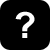
<style>
.page{position:relative;width:50px;height:50px;background:#000000}
.page>*{position:absolute;margin:0}
.t1{font:36px "Arial-BoldMT";color:#ffffff}
</style>
<div class="page">
<p class="t1" style="left:15px;top:11px;width:20px;height:27px">?</p>
</div>
